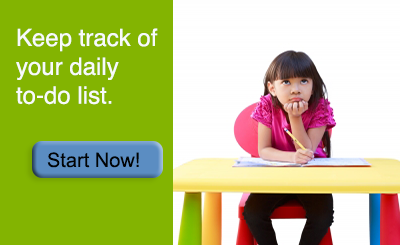
<style>
.page{position:relative;width:400px;height:245px;background:#83b401}
.page>*{position:absolute;margin:0}
.t1{font:24px "Helvetica";color:#f8fafa}
.t2{font:20px "ArialMT";color:#020303}
</style>
<div class="page">
<p class="t1" style="left:16px;top:28px;width:142px;height:77px">Keep track of<br>your daily <br>to-do list.</p>
<p class="t2" style="left:47px;top:152px;width:92px;height:16px">Start Now!</p>
</div>
